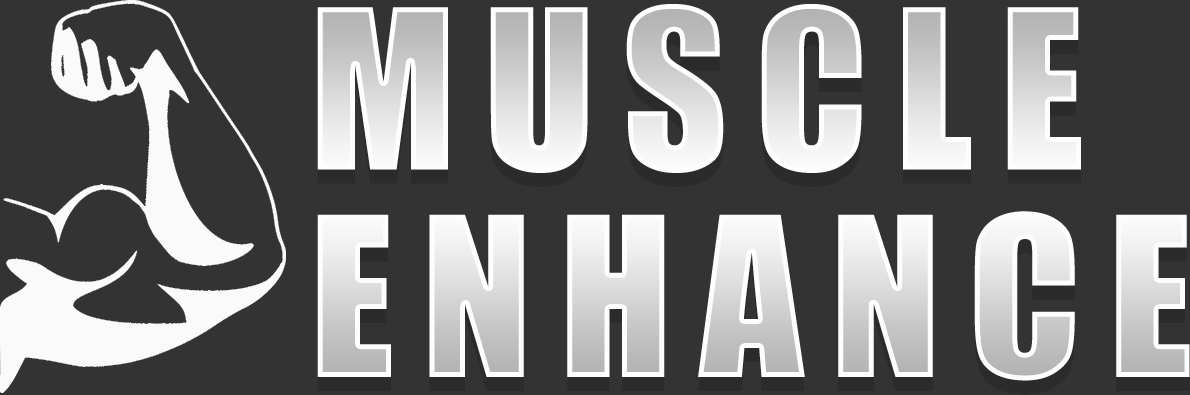
<style>
.page{position:relative;width:1190px;height:395px;background:#333333}
.page>*{position:absolute;margin:0}
.t1{font:205px "Impact";letter-spacing:0.13em}
</style>
<div class="page">
<p class="t1" style="left:317px;top:4px;width:764px;height:169px">MUSCLE</p>
<p class="t1" style="left:317px;top:211px;width:873px;height:170px">ENHANCE</p>
</div>
